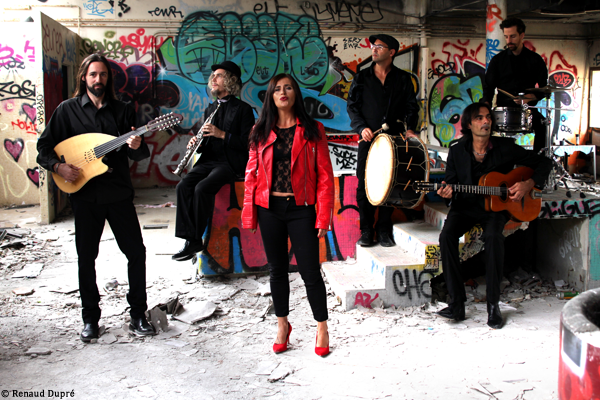
<style>
.page{position:relative;width:600px;height:400px}
.page>*{position:absolute;margin:0}
.t1{font:9.6px "Cambria";letter-spacing:0.005em;color:#000000;font-weight:bold}
</style>
<div class="page">
<p class="t1" style="left:1px;top:389px;width:74px;height:10px">© Renaud Dupré</p>
</div>
